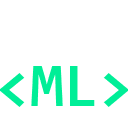
<style>
.page{position:relative;width:128px;height:128px;background:#ffffff}
.page>*{position:absolute;margin:0}
.t1{font:62px "Consolas-Bold";color:#00ee97}
</style>
<div class="page">
<p class="t1" style="left:0px;top:66px;width:129px;height:41px">&lt;ML&gt;</p>
</div>
